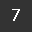
<style>
.page{position:relative;width:32px;height:32px;background:#333333}
.page>*{position:absolute;margin:0}
.t1{font:17.8px "MyriadPro-Regular";color:#ffffff;scale:1.12 1}
</style>
<div class="page">
<p class="t1" style="left:12px;top:9px;width:8px;height:12px">7</p>
</div>
